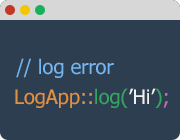
<style>
.page{position:relative;width:180px;height:140px;background:#2c3e50}
.page>*{position:absolute;margin:0}
.t1{font:20px "Tahoma";color:#77b5ef}
.t2{font:20px "Tahoma";color:#e09142}
.t3{font:20px "Tahoma";color:#32a660}
.t4{font:20px "Tahoma";color:#f1f1f1}
.t5{font:20px "Tahoma";color:#ca69bc}
</style>
<div class="page">
<p class="t1" style="left:16px;top:58px;width:98px;height:20px">// log error</p>
<p class="t2" style="left:15px;top:88px;width:153px;height:20px">LogApp::<span class="t3">log(</span><span class="t4">’Hi’</span><span class="t3">)</span><span class="t5">;</span></p>
</div>
